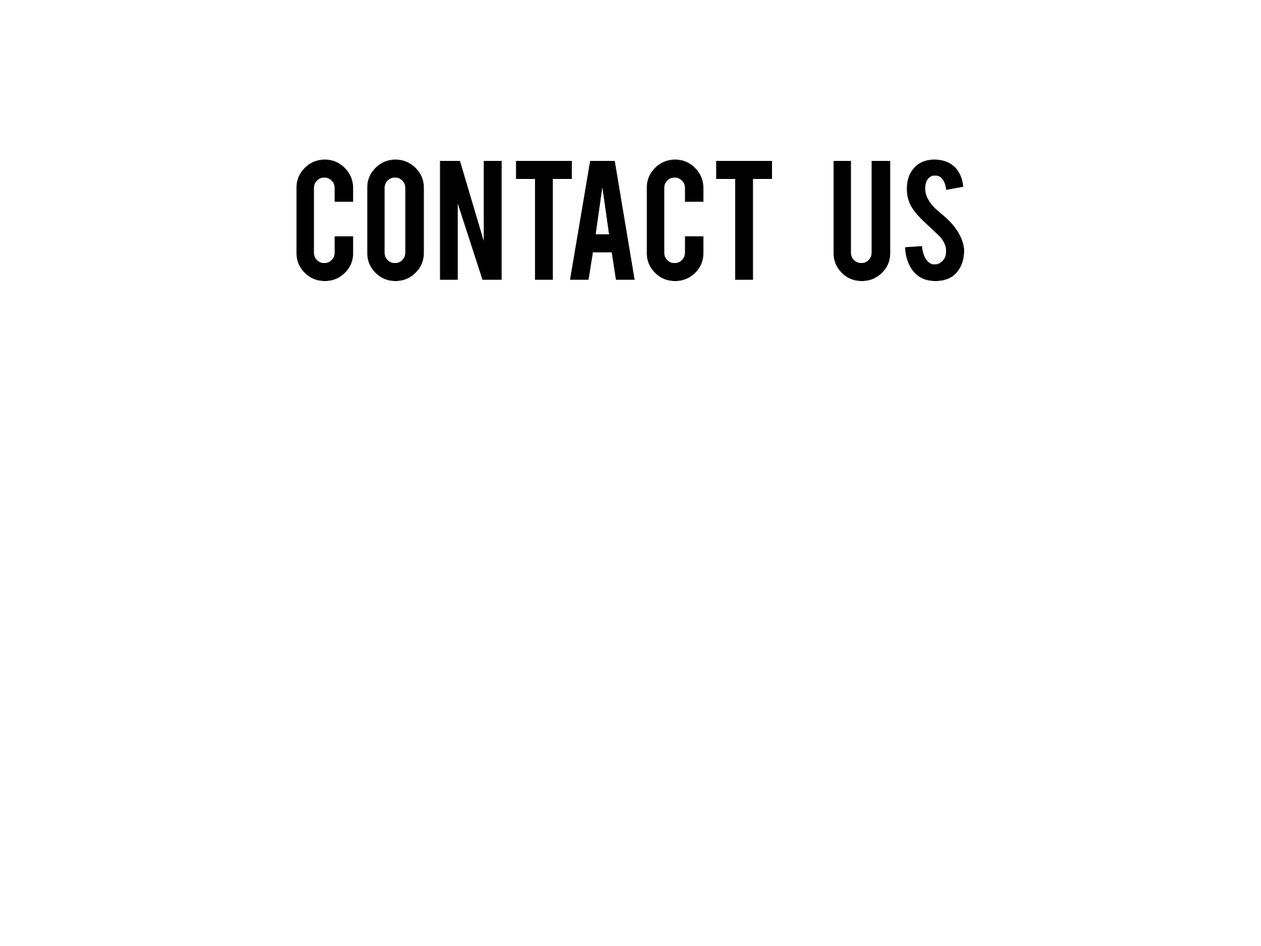
<style>
.page{position:relative;width:1261px;height:946px;background:#ffffff}
.page>*{position:absolute;margin:0}
.t1{font:133.5px "Bebas";color:#000000}
</style>
<div class="page">
<p class="t1" style="left:296px;top:159px;width:669px;height:122px">Contact    Us</p>
</div>
